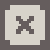
<style>
.page{position:relative;width:50px;height:50px;background:#d7d3ca}
.page>*{position:absolute;margin:0}
.t1{font:35.2px "ArcadeClassic";letter-spacing:-0.32em;color:#655d5d}
</style>
<div class="page">
<p class="t1" style="left:16px;top:16px;width:18px;height:18px">x</p>
</div>
